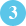
<style>
.page{position:relative;width:26px;height:26px;background:#5bc6e9}
.page>*{position:absolute;margin:0}
.t1{font:18px "Times-Bold";color:#ffffff}
</style>
<div class="page">
<p class="t1" style="left:9px;top:6px;width:9px;height:13px">3</p>
</div>
